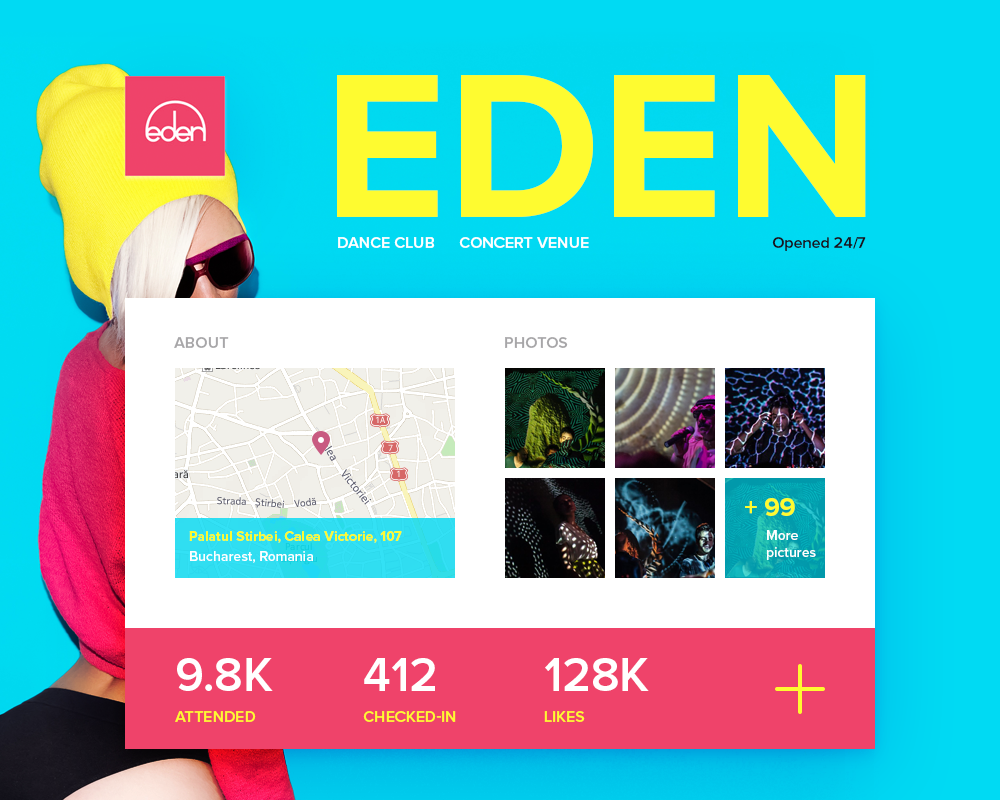
<style>
.page{position:relative;width:1000px;height:800px}
.page>*{position:absolute;margin:0}
.t1{font:213px "ProximaNova-Bold";color:#fefb30;text-transform:uppercase}
.t2{font:16px "ProximaNova-Semibold";color:#ffffff;text-transform:uppercase}
.t3{font:16px "ProximaNova-Semibold";color:#18141e}
.t4{font:16px "ProximaNova-Semibold";color:#a7a6a8;text-transform:uppercase}
.t5{font:26px "ProximaNova-Bold";color:#fefb30}
.t6{font:14px "ProximaNova-Bold";color:#fefb30}
.t7{font:14px "ProximaNova-Semibold";color:#ffffff}
.t8{font:48px "ProximaNova-Semibold";color:#ffffff;text-transform:uppercase}
.t9{font:16px "ProximaNova-Semibold";color:#fefb30;text-transform:uppercase}
</style>
<div class="page">
<p class="t1" style="left:337px;top:75px;width:529px;height:142px">Eden</p>
<p class="t2" style="left:338px;top:237px;width:97px;height:11px">Dance Club</p>
<p class="t2" style="left:459px;top:237px;width:130px;height:11px">Concert Venue</p>
<p class="t3" style="left:772px;top:237px;width:94px;height:14px">Opened 24/7</p>
<p class="t4" style="left:174px;top:337px;width:55px;height:11px">About</p>
<p class="t4" style="left:505px;top:337px;width:63px;height:11px">Photos</p>
<p class="t5" style="left:745px;top:498px;width:50px;height:18px">+ 99</p>
<p class="t6" style="left:189px;top:531px;width:213px;height:12px">Palatul Stirbei, Calea Victorie, 107</p>
<p class="t7" style="left:767px;top:530px;width:49px;height:30px">More <br>pictures</p>
<p class="t7" style="left:190px;top:551px;width:123px;height:12px">Bucharest, Romania</p>
<p class="t8" style="left:177px;top:658px;width:96px;height:33px">9.8K</p>
<p class="t8" style="left:364px;top:658px;width:71px;height:33px">412</p>
<p class="t8" style="left:545px;top:658px;width:104px;height:33px">128K</p>
<p class="t9" style="left:175px;top:711px;width:81px;height:11px">Attended</p>
<p class="t9" style="left:363px;top:711px;width:93px;height:11px">Checked-IN</p>
<p class="t9" style="left:544px;top:711px;width:41px;height:11px">Likes</p>
</div>
